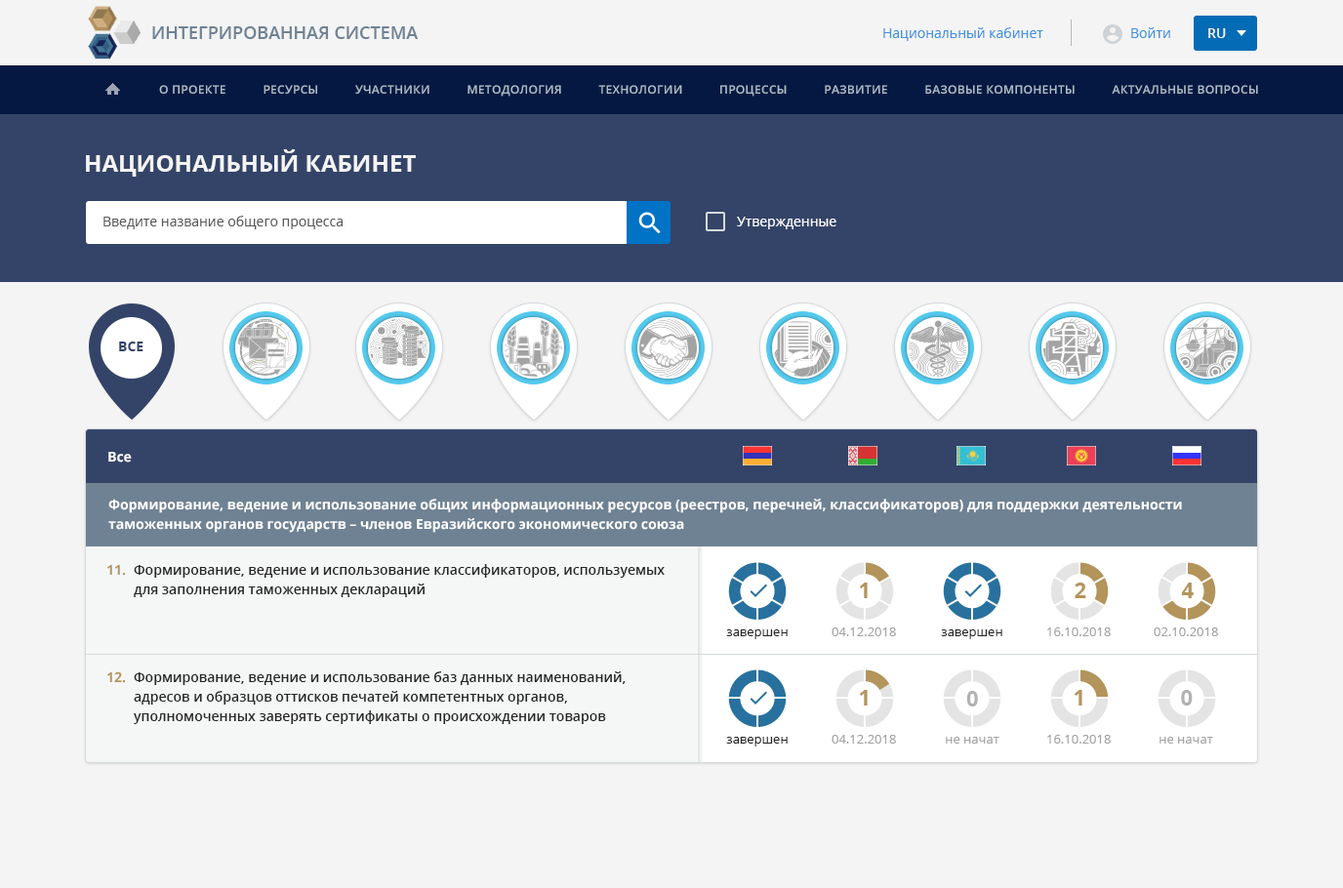
<style>
.page{position:relative;width:1343px;height:888px;background:#f4f4f4}
.page>*{position:absolute;margin:0}
.t1{font:17.6px "OpenSans-Semibold";color:#6f8294;text-transform:uppercase}
.t2{font:13.7px "OpenSans";color:#4292df}
.t3{font:13.7px "OpenSans-Semibold";color:#f4f4f4}
.t4{font:11.7px "OpenSans-Semibold";letter-spacing:0.025em;color:#acbdc7;text-transform:uppercase}
.t5{font:23.4px "OpenSans-Bold";color:#f4f4f4;text-transform:uppercase}
.t6{font:13.7px "OpenSans";color:#595959}
.t7{font:13.7px "OpenSans";color:#ffffff}
.t8{font:13.7px "OpenSans-Bold";color:#344468}
.t9{font:13.7px "OpenSans-Bold";color:#fdfdfd}
.t10{font:13.7px/19.5px "OpenSans-Bold";color:#fdfdfd}
.t11{font:13.7px "OpenSans-Bold";color:#b3945b}
.t12{font:13.7px/19.5px "OpenSans-Semibold";color:#262626}
.t13{font:21.5px "OpenSans-Bold";color:#b3945b}
.t14{font:12.7px "OpenSans";color:#262626}
.t15{font:12.7px "OpenSans";color:#a3a3a3}
.t16{font:21.5px "OpenSans-Bold";color:#b1b1b1}
</style>
<div class="page">
<p class="t1" style="left:152px;top:26px;width:266px;height:13px">Интегрированная система</p>
<p class="t2" style="left:883px;top:27px;width:160px;height:14px">Национальный кабинет</p>
<p class="t2" style="left:1131px;top:27px;width:39px;height:11px">Войти</p>
<p class="t3" style="left:1208px;top:28px;width:18px;height:10px">RU</p>
<p class="t4" style="left:159px;top:85px;width:1099px;height:12px">О проекте           Ресурсы           Участники           Методология           Технологии           Процессы           Развитие           Базовые компоненты           Актуальные вопросы</p>
<p class="t5" style="left:86px;top:149px;width:330px;height:28px">Национальный кабинет</p>
<p class="t6" style="left:103px;top:216px;width:240px;height:13px">Введите название общего процесса</p>
<p class="t7" style="left:737px;top:217px;width:99px;height:12px">Утвержденные</p>
<p class="t8" style="left:119px;top:342px;width:24px;height:9px">ВСЕ</p>
<p class="t9" style="left:108px;top:452px;width:24px;height:11px">Все</p>
<p class="t10" style="left:108px;top:499px;width:1074px;height:34px">Формирование, ведение и использование общих информационных ресурсов (реестров, перечней, классификаторов) для поддержки деятельности таможенных органов государств – членов Евразийского экономического союза</p>
<p class="t11" style="left:107px;top:565px;width:19px;height:11px">11.</p>
<p class="t12" style="left:134px;top:564px;width:531px;height:33px">Формирование, ведение и использование классификаторов, используемых для заполнения таможенных деклараций</p>
<p class="t13" style="left:859px;top:583px;width:9px;height:15px">1</p>
<p class="t13" style="left:1074px;top:583px;width:12px;height:15px">2</p>
<p class="t13" style="left:1181px;top:583px;width:12px;height:15px">4</p>
<p class="t14" style="left:726px;top:629px;width:62px;height:10px">завершен</p>
<p class="t15" style="left:831px;top:627px;width:65px;height:9px">04.12.2018</p>
<p class="t14" style="left:941px;top:629px;width:61px;height:10px">завершен</p>
<p class="t15" style="left:1047px;top:627px;width:64px;height:9px">16.10.2018</p>
<p class="t15" style="left:1153px;top:627px;width:65px;height:9px">02.10.2018</p>
<p class="t11" style="left:107px;top:671px;width:19px;height:12px">12.</p>
<p class="t12" style="left:134px;top:671px;width:492px;height:53px">Формирование, ведение и использование баз данных наименований, адресов и образцов оттисков печатей компетентных органов, уполномоченных заверять сертификаты о происхождении товаров</p>
<p class="t13" style="left:859px;top:690px;width:9px;height:16px">1</p>
<p class="t13" style="left:1073px;top:690px;width:9px;height:16px">1</p>
<p class="t16" style="left:1181px;top:690px;width:11px;height:16px">0</p>
<p class="t16" style="left:966px;top:691px;width:12px;height:16px">0</p>
<p class="t14" style="left:726px;top:737px;width:62px;height:10px">завершен</p>
<p class="t15" style="left:831px;top:735px;width:65px;height:9px">04.12.2018</p>
<p class="t15" style="left:946px;top:737px;width:53px;height:7px">не начат</p>
<p class="t15" style="left:1047px;top:735px;width:64px;height:9px">16.10.2018</p>
<p class="t15" style="left:1159px;top:737px;width:54px;height:7px">не начат</p>
</div>
